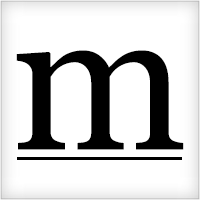
<style>
.page{position:relative;width:200px;height:200px;background:#ffffff}
.page>*{position:absolute;margin:0}
.t1{font:200px "Georgia";color:#000000}
</style>
<div class="page">
<p class="t1" style="left:16px;top:50px;width:168px;height:100px">m</p>
</div>
